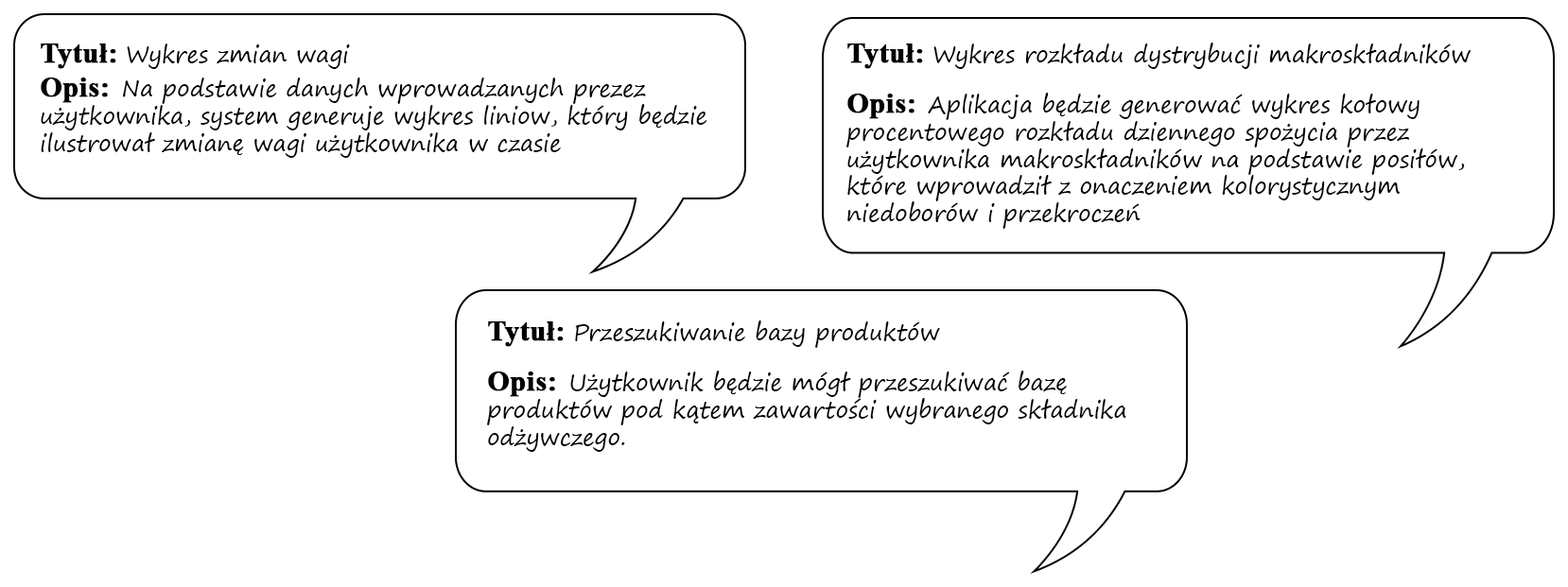
<style>
.page{position:relative;width:1568px;height:587px;background:#ffffff}
.page>*{position:absolute;margin:0}
.t1{font:22.7px "SegoePrint";color:#000000}
.t2{font:28.4px "TimesNewRomanPS-BoldMT";color:#000000;font-weight:bold}
</style>
<div class="page">
<p class="t1" style="left:41px;top:44px;width:666px;height:114px"><span class="t2">Tytuł: </span>Wykres zmian wagi<br><span class="t2">Opis:  </span>Na podstawie danych wprowadzanych prezez użytkownika, system generuje wykres liniow, który będzie ilustrował zmianę wagi użytkownika w czasie</p>
<p class="t1" style="left:846px;top:43px;width:625px;height:186px"><span class="t2">Tytuł: </span>Wykres rozkładu dystrybucji makroskładników<br><br><span class="t2">Opis:  </span>Aplikacja będzie generować wykres kołowy procentowego rozkładu dziennego spożycia przez użytkownika makroskładników na podstawie posiłów, które wprowadził z onaczeniem kolorystycznym niedoborów i przekroczeń</p>
<p class="t1" style="left:487px;top:321px;width:639px;height:131px"><span class="t2">Tytuł: </span>Przeszukiwanie bazy produktów<br><br><span class="t2">Opis:  </span>Użytkownik będzie mógł przeszukiwać bazę produktów pod kątem zawartości wybranego składnika odżywczego.</p>
</div>
